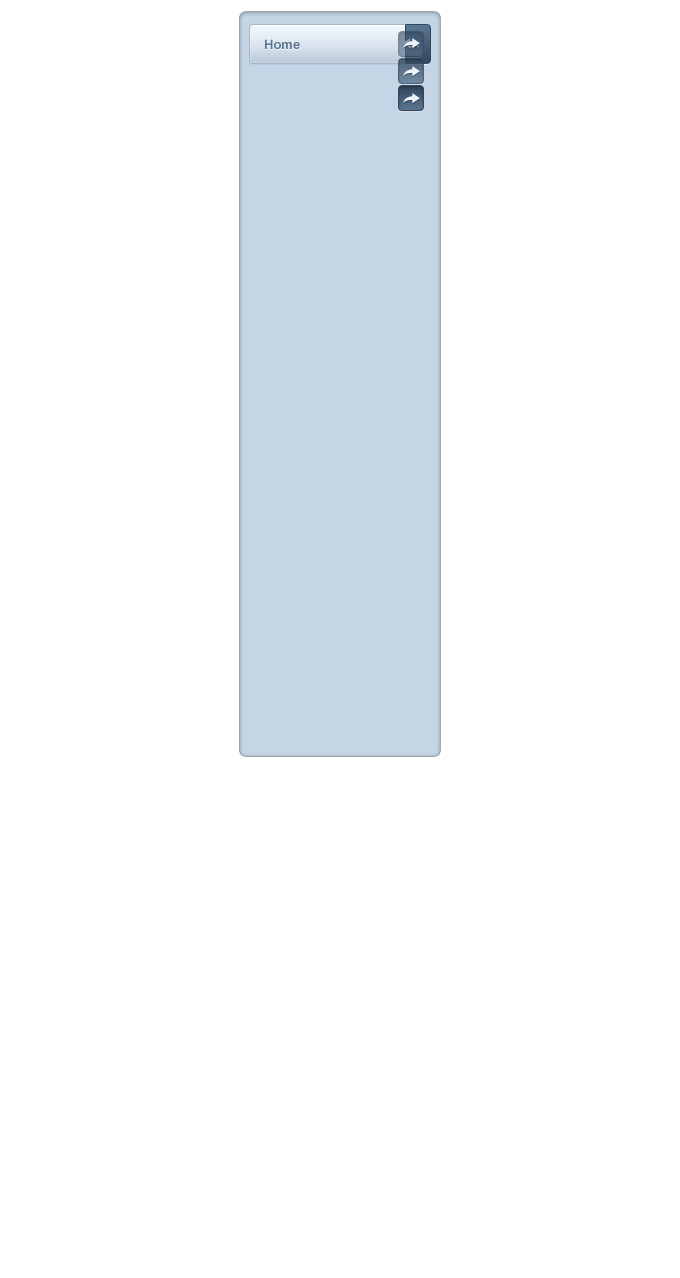
<style>
.page{position:relative;width:680px;height:1278px;background:#ffffff}
.page>*{position:absolute;margin:0}
.t1{font:13px "Arial-BoldMT";color:#597490}
</style>
<div class="page">
<p class="t1" style="left:265px;top:39px;width:35px;height:10px">Home</p>
</div>
